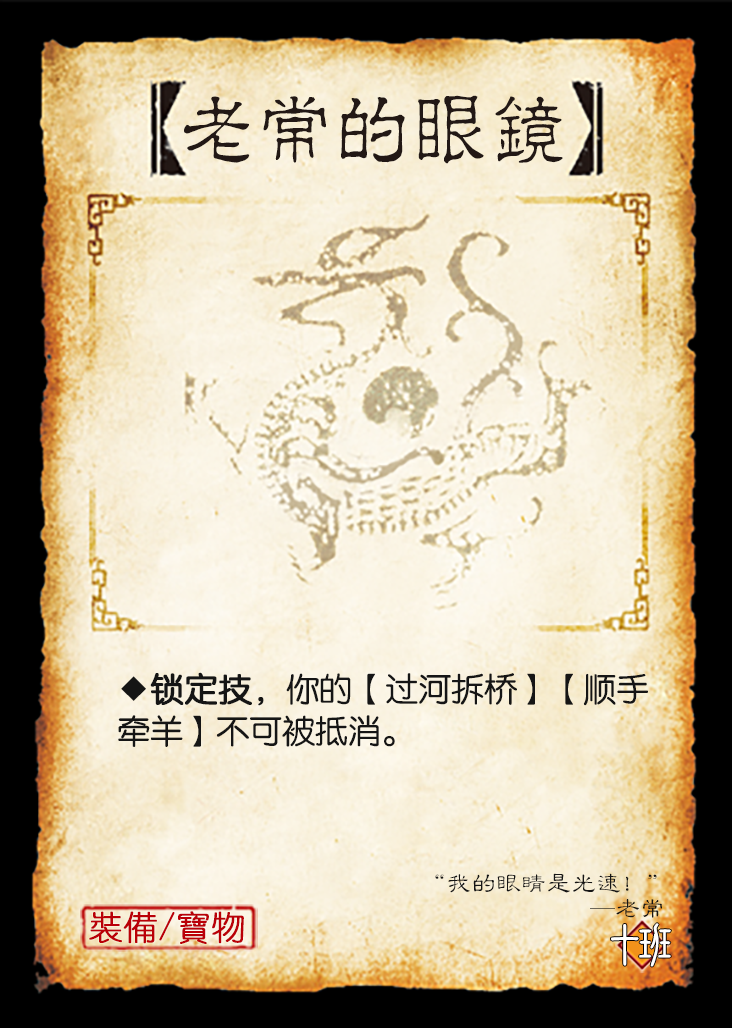
<style>
.page{position:relative;width:732px;height:1028px}
.page>*{position:absolute;margin:0}
.t1{font:82.2px "JMFLS_GBK";color:#221815;scale:0.95 1}
.t2{font:33.3px/41.7px "FZY3JW--GB1-0";letter-spacing:-0.01em;color:#151515}
.t3{font:33.3px/41.7px "FZY3JW--GB1-0";letter-spacing:-0.01em;color:#151515;font-weight:bold}
.t4{font:25px/25px "FZLBJW--GB1-0";color:#151515}
.t5{font:33.3px "YouYuan";color:#ba0007;font-weight:bold}
.t6{font:50px "DFNewChuan-W5-WINP-BF";letter-spacing:-0.4em;color:#ffffff}
</style>
<div class="page">
<p class="t1" style="left:184px;top:95px;width:379px;height:69px">老常的眼鏡</p>
<p class="t2" style="left:118px;top:672px;width:530px;height:75px">◆<span class="t3">锁定技，</span>你的【过河拆桥】【顺手<br>牵羊】不可被抵消。</p>
<p class="t4" style="left:435px;top:873px;width:227px;height:45px;text-align:right">“我的眼睛是光速！”<br>                                      —老常</p>
<p class="t5" style="left:89px;top:911px;width:155px;height:33px">裝備/寶物</p>
<p class="t6" style="left:611px;top:923px;width:60px;height:44px">十班</p>
</div>
